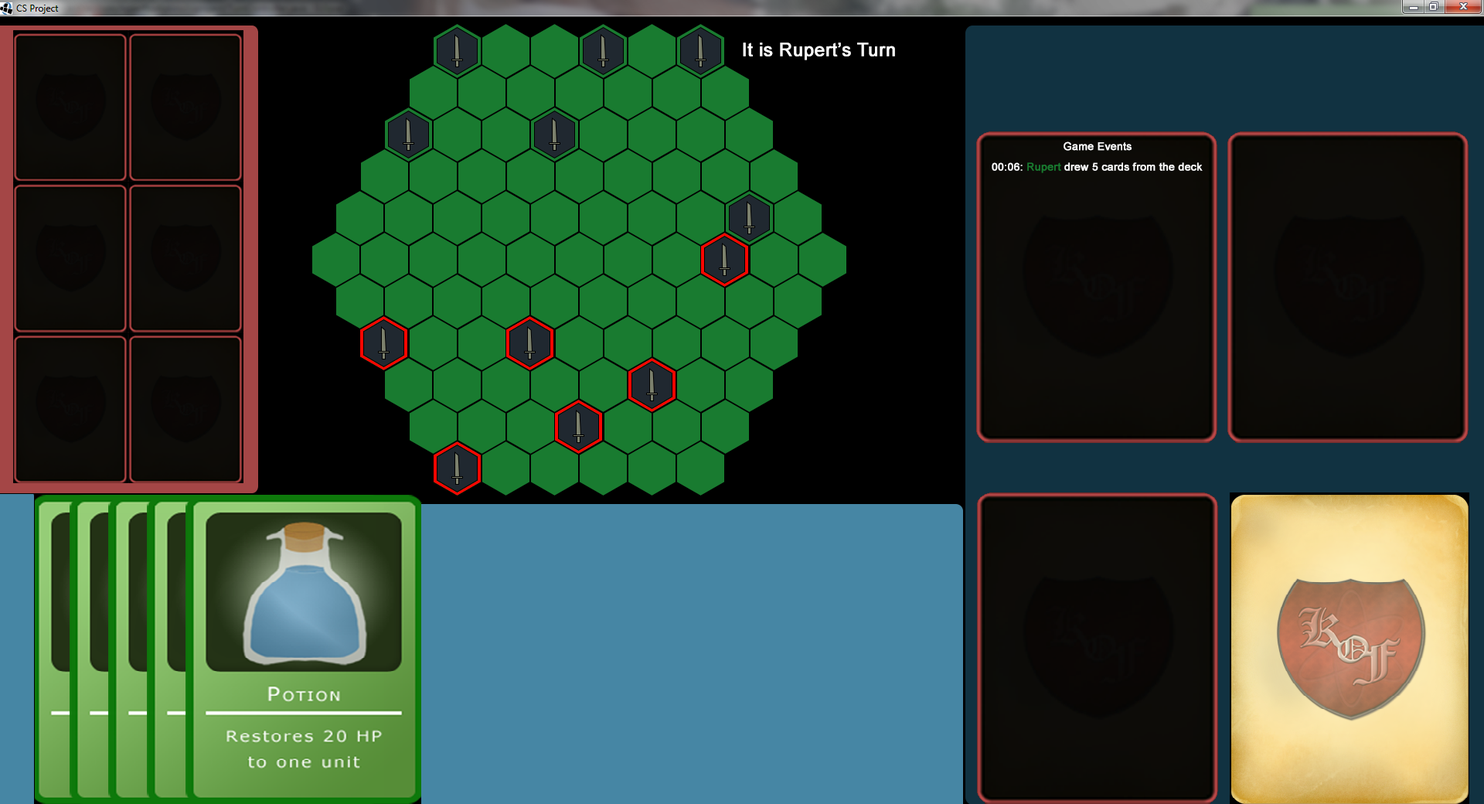
<style>
.page{position:relative;width:1484px;height:804px}
.page>*{position:absolute;margin:0}
.t1{font:18.5px "ArialMT";color:#ffffff;font-weight:bold}
.t2{font:10.8px "ArialMT";color:#ffffff;font-weight:bold}
.t3{font:10.8px "ArialMT";color:#197b30;font-weight:bold}
</style>
<div class="page">
<p class="t1" style="left:743px;top:43px;width:152px;height:17px">It is Rupert’s Turn</p>
<p class="t2" style="left:1063px;top:141px;width:68px;height:10px">Game Events</p>
<p class="t2" style="left:991px;top:162px;width:211px;height:11px">00:06: <span class="t3">Rupert</span> drew 5 cards from the deck</p>
</div>
